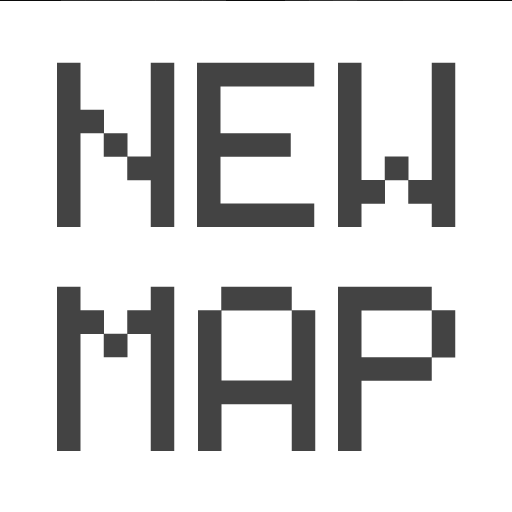
<style>
.page{position:relative;width:512px;height:512px;background:#ffffff}
.page>*{position:absolute;margin:0}
.t1{font:375px "monogramextended";color:#434343}
</style>
<div class="page">
<p class="t1" style="left:57px;top:61px;width:399px;height:165px">NEW</p>
<p class="t1" style="left:57px;top:285px;width:399px;height:165px">MAP</p>
</div>
